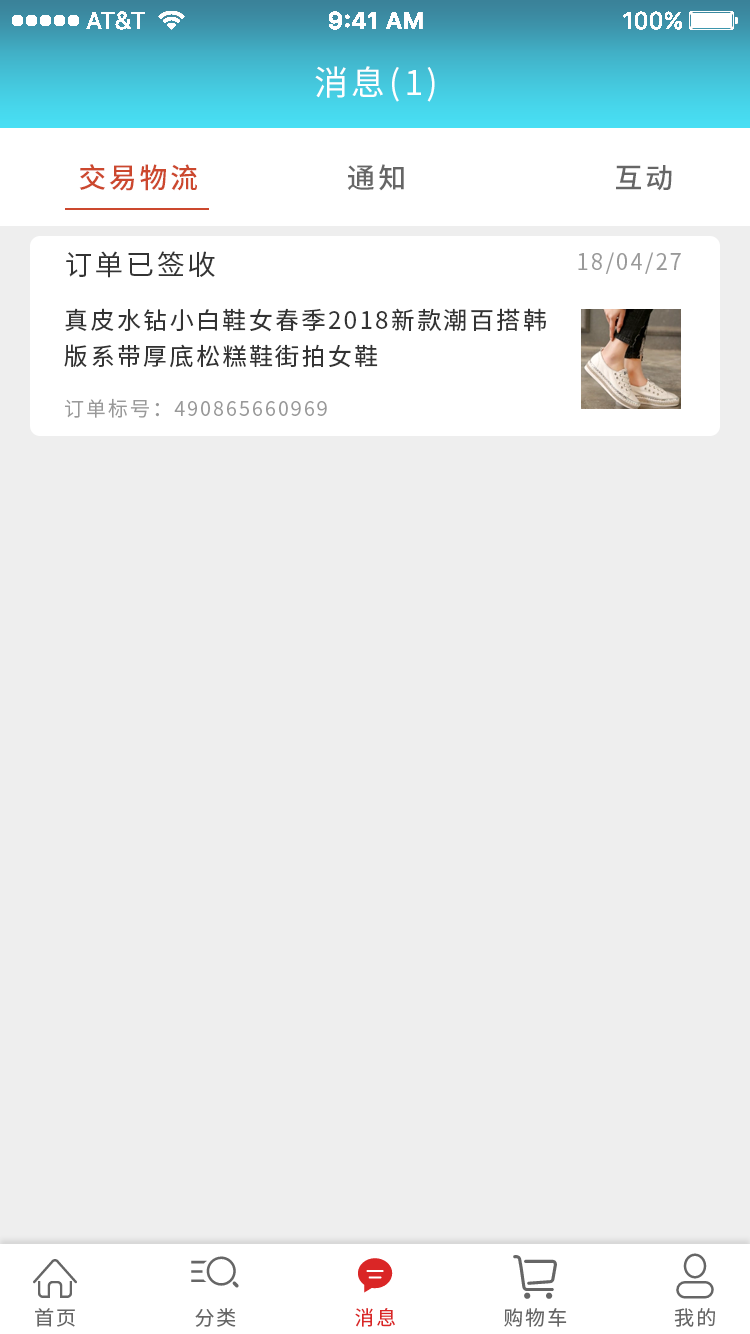
<style>
.page{position:relative;width:750px;height:1334px;background:#eeeeee}
.page>*{position:absolute;margin:0}
.t1{font:34px "SourceHanSansCN-Regular";letter-spacing:0.1em;color:#ffffff}
.t2{font:28px "SourceHanSansCN-Medium";letter-spacing:0.1em;color:#cc482e}
.t3{font:28px "SourceHanSansCN-Medium";letter-spacing:0.1em;color:#666666}
.t4{font:28px "SourceHanSansCN-Regular";letter-spacing:0.1em;color:#333333}
.t5{font:22px "SourceHanSansCN-Regular";letter-spacing:0.1em;color:#999999}
.t6{font:24px/36px "SourceHanSansCN-Regular";letter-spacing:0.1em;color:#333333}
.t7{font:20px "SourceHanSansCN-Normal";letter-spacing:0.1em;color:#999999}
.t8{font:20px "SourceHanSansCN-Regular";letter-spacing:0.1em;color:#666666}
.t9{font:20px "SourceHanSansCN-Regular";letter-spacing:0.1em;color:#da2626}
</style>
<div class="page">
<p class="t1" style="left:315px;top:66px;width:120px;height:36px">消息(1)</p>
<p class="t2" style="left:79px;top:164px;width:118px;height:27px">交易物流</p>
<p class="t3" style="left:347px;top:164px;width:57px;height:27px">通知</p>
<p class="t3" style="left:616px;top:165px;width:56px;height:26px">互动</p>
<p class="t4" style="left:66px;top:251px;width:149px;height:27px">订单已签收</p>
<p class="t5" style="left:578px;top:252px;width:103px;height:22px">18/04/27</p>
<p class="t6" style="left:64px;top:308px;width:482px;height:60px">真皮水钻小白鞋女春季2018新款潮百搭韩版系带厚底松糕鞋街拍女鞋</p>
<p class="t7" style="left:65px;top:398px;width:262px;height:20px">订单标号：490865660969</p>
<p class="t8" style="left:35px;top:1308px;width:40px;height:19px">首页</p>
<p class="t8" style="left:195px;top:1308px;width:41px;height:19px">分类</p>
<p class="t9" style="left:355px;top:1308px;width:40px;height:19px">消息</p>
<p class="t8" style="left:504px;top:1308px;width:63px;height:19px">购物车</p>
<p class="t8" style="left:674px;top:1308px;width:41px;height:19px">我的</p>
</div>
